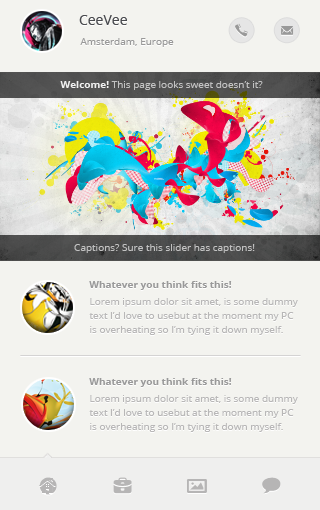
<style>
.page{position:relative;width:320px;height:510px;background:#f3f3ef}
.page>*{position:absolute;margin:0}
.t1{font:14px "OpenSans";color:#4a4b4f}
.t2{font:10px "OpenSans";color:#999999}
.t3{font:10px "OpenSans";color:#c2c2c2}
.t4{font:10px "OpenSans-Bold";color:#f0f0f0}
.t5{font:10px "OpenSans-Bold";color:#999999}
.t6{font:10px/14px "OpenSans";color:#b8b7b7}
</style>
<div class="page">
<p class="t1" style="left:79px;top:15px;width:48px;height:10px">CeeVee</p>
<p class="t2" style="left:80px;top:38px;width:94px;height:9px">Amsterdam, Europe</p>
<p class="t3" style="left:60px;top:81px;width:203px;height:9px"><span class="t4">Welcome!</span> This page looks sweet doesn’t it?</p>
<p class="t3" style="left:74px;top:244px;width:181px;height:9px">Captions? Sure this slider has captions!</p>
<p class="t5" style="left:89px;top:281px;width:143px;height:9px">Whatever you think fits this!</p>
<p class="t6" style="left:89px;top:298px;width:209px;height:37px">Lorem ipsum dolor sit amet, is some dummy <br>text I’d love to usebut at the moment my PC<br>is overheating so I’m tying it down myself.</p>
<p class="t5" style="left:89px;top:378px;width:143px;height:9px">Whatever you think fits this!</p>
<p class="t6" style="left:89px;top:395px;width:209px;height:37px">Lorem ipsum dolor sit amet, is some dummy <br>text I’d love to usebut at the moment my PC<br>is overheating so I’m tying it down myself.</p>
</div>
